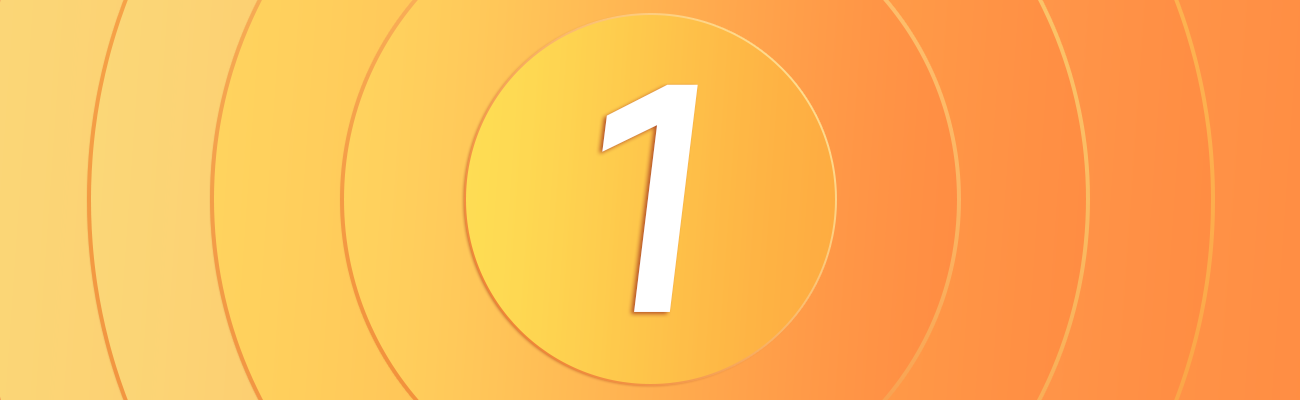
<style>
.page{position:relative;width:1300px;height:400px}
.page>*{position:absolute;margin:0}
.t1{font:302.3px "DingTalk-JinBuTi";letter-spacing:0.1em;color:#ffffff}
</style>
<div class="page">
<p class="t1" style="left:602px;top:84px;width:96px;height:228px">1</p>
</div>
